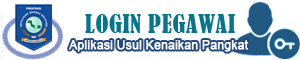
<style>
.page{position:relative;width:300px;height:60px;background:#ffffff}
.page>*{position:absolute;margin:0}
.t1{font:24px "BernardMT-Condensed";letter-spacing:0.025em;color:#07758d}
.t2{font:12px "ArialMT";color:#ffffff;font-weight:bold}
</style>
<div class="page">
<p class="t1" style="left:85px;top:14px;width:150px;height:19px">LOGIN PEGAWAI</p>
<p class="t2" style="left:69px;top:40px;width:180px;height:12px">Aplikasi Usul Kenaikan Pangkat</p>
</div>
